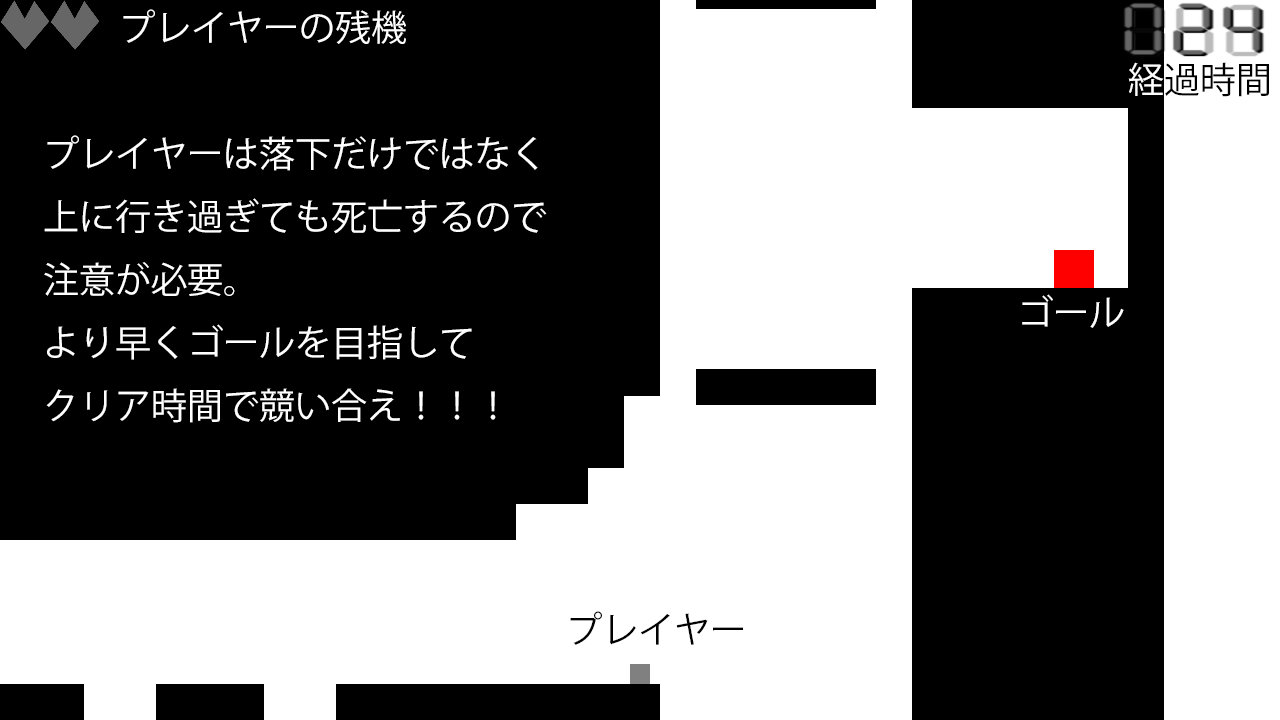
<style>
.page{position:relative;width:1280px;height:720px;background:#000000}
.page>*{position:absolute;margin:0}
.t1{font:36px "KozGoPr6N-Regular";color:#ffffff}
.t2{font:36px "KozGoPr6N-Regular";color:#000000}
</style>
<div class="page">
<p class="t1" style="left:123px;top:9px;width:283px;height:35px">プレイヤーの残機</p>
<p class="t2" style="left:1128px;top:62px;width:141px;height:35px"><span class="t1">経</span>過時間</p>
<p class="t1" style="left:44px;top:135px;width:503px;height:288px">プレイヤーは落下だけではなく<br>上に行き過ぎても死亡するので<br>注意が必要。<br>より早くゴールを目指して<br>クリア時間で競い合え！！！</p>
<p class="t1" style="left:1022px;top:294px;width:102px;height:34px">ゴール</p>
<p class="t2" style="left:570px;top:611px;width:173px;height:34px">プレイヤー</p>
</div>
